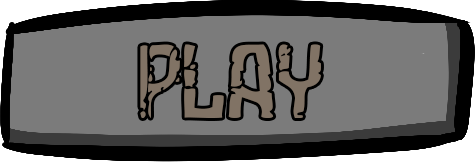
<style>
.page{position:relative;width:475px;height:162px;background:#7b7b7b}
.page>*{position:absolute;margin:0}
.t1{font:105px "IndustrialPoison";color:#817365}
</style>
<div class="page">
<p class="t1" style="left:140px;top:44px;width:181px;height:74px">Play</p>
</div>
